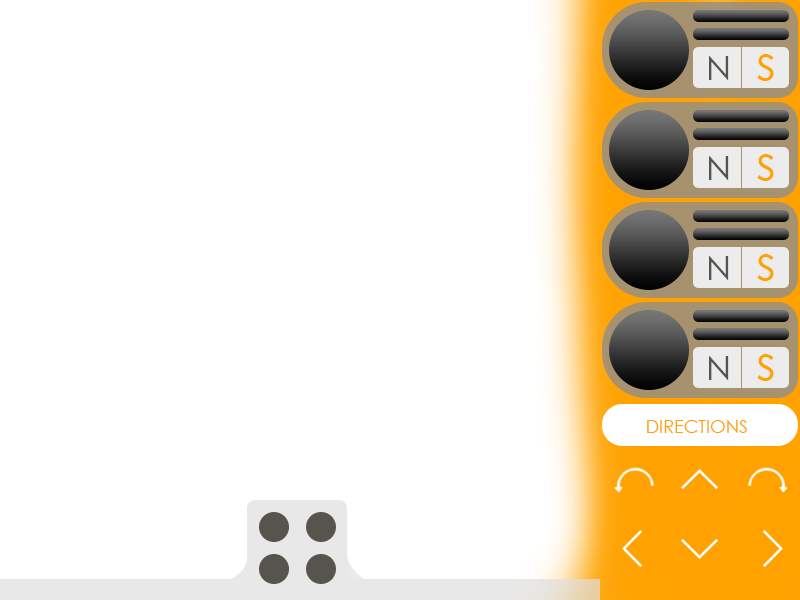
<style>
.page{position:relative;width:800px;height:600px;background:#ffffff}
.page>*{position:absolute;margin:0}
.t1{font:50.7px "CenturyGothic";color:#ffa200}
.t2{font:34.5px "CenturyGothic";color:#56544d}
.t3{font:18px "CenturyGothic";color:#ffa200}
</style>
<div class="page">
<p class="t1" style="left:757px;top:54px;width:17px;height:27px">s</p>
<p class="t2" style="left:709px;top:56px;width:20px;height:24px">N</p>
<p class="t2" style="left:709px;top:156px;width:20px;height:24px">N</p>
<p class="t1" style="left:757px;top:154px;width:17px;height:27px">s</p>
<p class="t2" style="left:709px;top:256px;width:20px;height:24px">N</p>
<p class="t1" style="left:757px;top:254px;width:17px;height:27px">s</p>
<p class="t2" style="left:709px;top:356px;width:20px;height:24px">N</p>
<p class="t1" style="left:757px;top:354px;width:17px;height:27px">s</p>
<p class="t3" style="left:647px;top:420px;width:100px;height:13px">DIRECTIONS</p>
</div>
